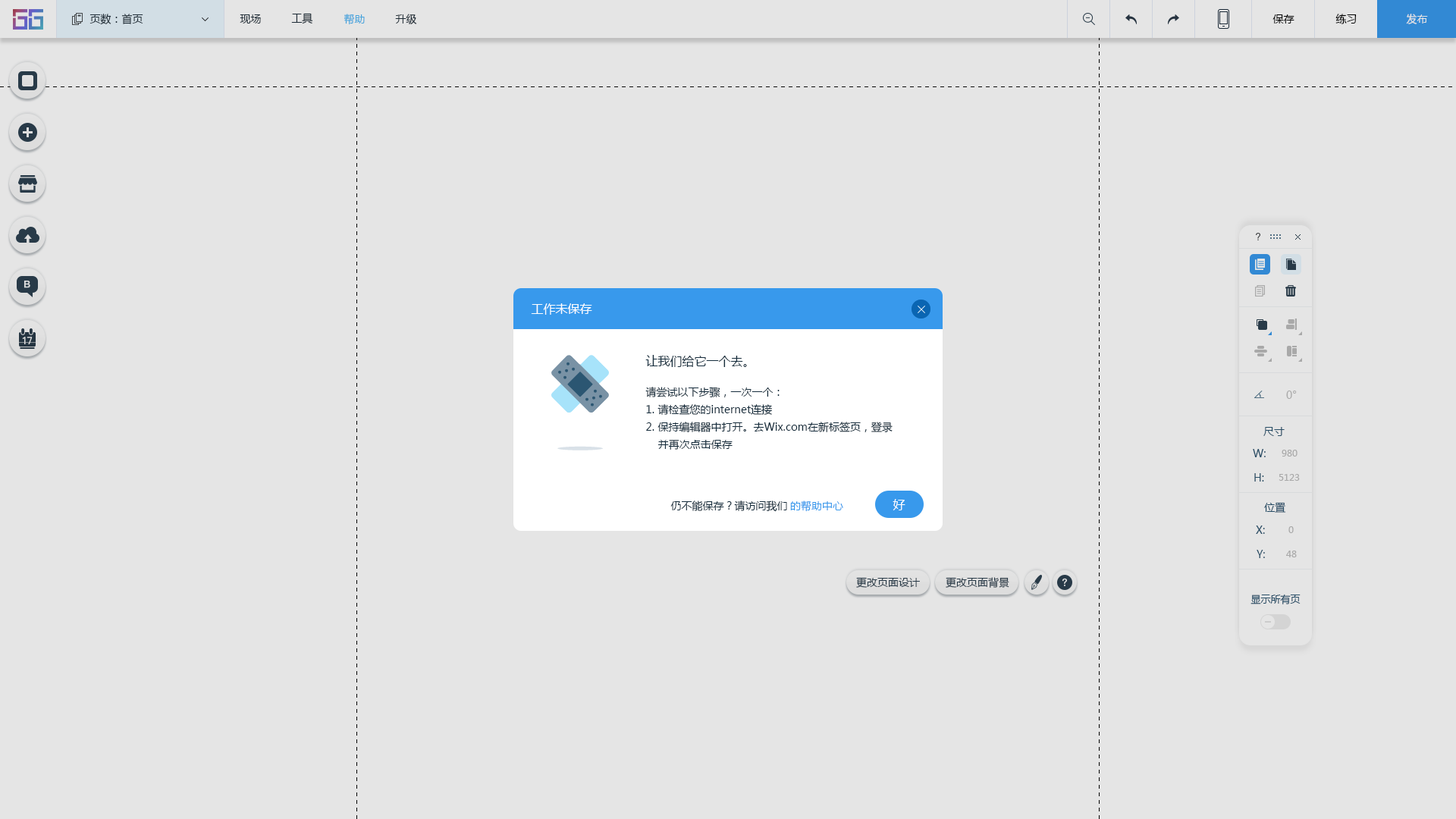
<style>
.page{position:relative;width:1456px;height:819px;background:#e5e5e5}
.page>*{position:absolute;margin:0}
.t1{font:10.6px "MicrosoftYaHei";color:#20303c}
.t2{font:10.6px "MicrosoftYaHei";color:#46a4dc}
.t3{font:10.6px "MicrosoftYaHei";color:#000000}
.t4{font:10.6px "MicrosoftYaHei";color:#e5e5e5}
.t5{font:12.1px "MicrosoftYaHei";color:#ffffff}
.t6{font:12.1px "MicrosoftYaHei";color:#162d3d}
.t7{font:10.6px/17.4px "MicrosoftYaHei";color:#162d3d}
.t8{font:10.6px "MicrosoftYaHei";color:#bcbcbc}
.t9{font:10.6px "MicrosoftYaHei";color:#2b5672}
.t10{font:9.1px "MicrosoftYaHei";color:#bcbcbc}
.t11{font:10.6px "MicrosoftYaHei";color:#162d3d}
.t12{font:10.6px "MicrosoftYaHei";color:#3899ec}
.t13{font:10.6px "MicrosoftYaHei";color:#2d4150}
.t14{font:9.9px "MicrosoftYaHei";color:#2b5672}
</style>
<div class="page">
<p class="t1" style="left:89px;top:14px;width:54px;height:11px">页数：首页</p>
<p class="t1" style="left:240px;top:14px;width:21px;height:10px">现场</p>
<p class="t1" style="left:291px;top:13px;width:22px;height:11px">工具</p>
<p class="t2" style="left:344px;top:14px;width:21px;height:11px">帮助</p>
<p class="t1" style="left:395px;top:14px;width:22px;height:10px">升级</p>
<p class="t3" style="left:1272px;top:14px;width:22px;height:10px">保存</p>
<p class="t3" style="left:1335px;top:14px;width:22px;height:10px">练习</p>
<p class="t4" style="left:1406px;top:14px;width:22px;height:10px">发布</p>
<p class="t5" style="left:531px;top:303px;width:61px;height:12px">工作未保存</p>
<p class="t6" style="left:645px;top:355px;width:102px;height:12px">让我们给它一个去。</p>
<p class="t7" style="left:645px;top:387px;width:248px;height:63px">请尝试以下步骤，一次一个：<br>1.请检查您的internet连接<br>2.保持编辑器中打开。去Wix.com在新标签页，登录<br>   并再次点击保存</p>
<p class="t8" style="left:1286px;top:391px;width:11px;height:8px">0°</p>
<p class="t9" style="left:1263px;top:427px;width:22px;height:9px">尺寸</p>
<p class="t9" style="left:1253px;top:449px;width:13px;height:8px">W:</p>
<p class="t10" style="left:1282px;top:450px;width:15px;height:7px">980</p>
<p class="t9" style="left:1254px;top:473px;width:10px;height:9px">H:</p>
<p class="t10" style="left:1279px;top:474px;width:21px;height:7px">5123</p>
<p class="t11" style="left:670px;top:500px;width:173px;height:12px">仍不能保存？请访问我们   <span class="t12">的帮助中心</span></p>
<p class="t5" style="left:893px;top:499px;width:12px;height:11px">好</p>
<p class="t9" style="left:1264px;top:502px;width:22px;height:11px">位置</p>
<p class="t9" style="left:1256px;top:526px;width:9px;height:8px">X:</p>
<p class="t10" style="left:1288px;top:526px;width:6px;height:7px">0</p>
<p class="t9" style="left:1257px;top:550px;width:8px;height:8px">Y:</p>
<p class="t10" style="left:1286px;top:551px;width:11px;height:6px">48</p>
<p class="t13" style="left:856px;top:577px;width:64px;height:11px">更改页面设计</p>
<p class="t13" style="left:946px;top:577px;width:63px;height:11px">更改页面背景</p>
<p class="t14" style="left:1250px;top:594px;width:51px;height:10px">显示所有页</p>
</div>
